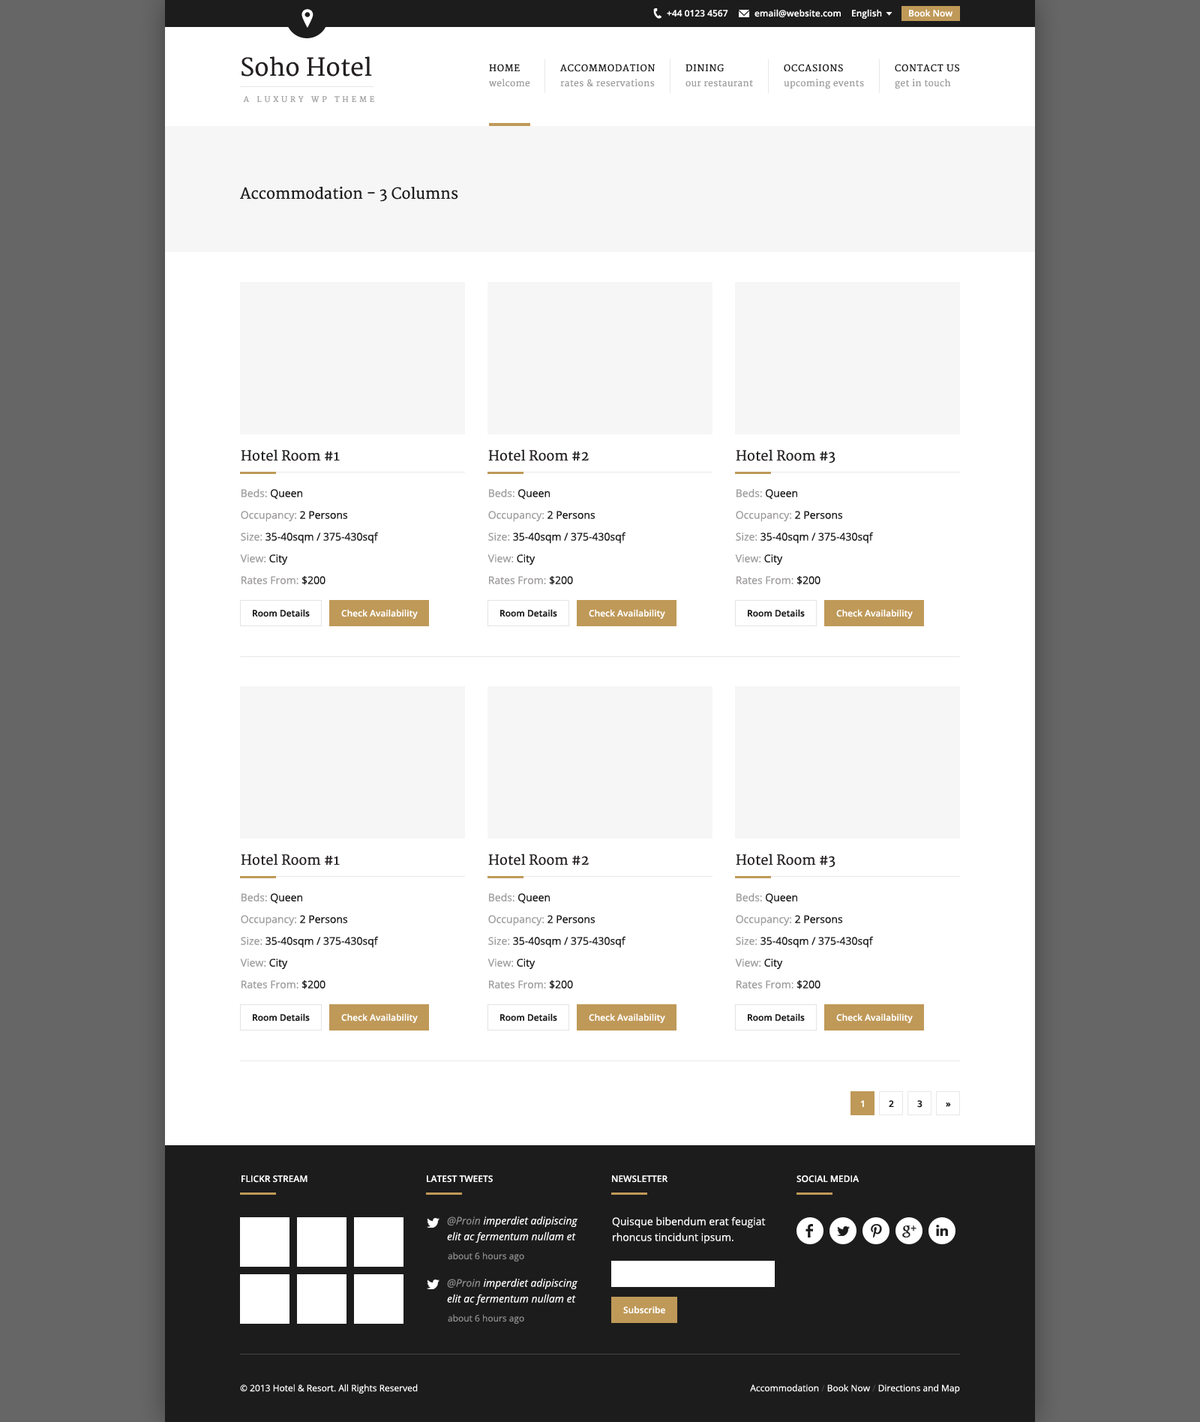
<style>
.page{position:relative;width:1200px;height:1422px;background:#ffffff}
.page>*{position:absolute;margin:0}
.t1{font:9px "OpenSans-Semibold";color:#ffffff}
.t2{font:24px "Merriweather";color:#231f20}
.t3{font:9px "Merriweather";letter-spacing:0.075em;color:#1c1c1c;text-transform:uppercase}
.t4{font:9px "Merriweather";letter-spacing:0.025em;color:#a09d9d}
.t5{font:7.5px "Merriweather";letter-spacing:0.4em;color:#a09d9d;text-transform:uppercase}
.t6{font:15px "Merriweather";color:#1c1c1c}
.t7{font:13.5px "Merriweather";color:#231f20}
.t8{font:10.5px/21.7px "OpenSans";color:#1c1c1c}
.t9{font:10.5px/21.7px "OpenSans";color:#a09d9d}
.t10{font:9px "OpenSans-Semibold";color:#1c1c1c}
.t11{font:9px "OpenSans-Semibold";color:#ffffff;text-transform:uppercase}
.t12{font:10.5px/15.7px "OpenSans-Italic";color:#ffffff}
.t13{font:10.5px/15.7px "OpenSans-Italic";color:#8b8b8b}
.t14{font:10.5px/15.7px "OpenSans";color:#ffffff}
.t15{font:9px "OpenSans";color:#8b8b8b}
.t16{font:9px "OpenSans";color:#ffffff}
.t17{font:9px "OpenSans";color:#424242}
</style>
<div class="page">
<p class="t1" style="left:667px;top:10px;width:61px;height:7px">+44 0123 4567</p>
<p class="t1" style="left:754px;top:9px;width:87px;height:8px">email@website.com</p>
<p class="t1" style="left:852px;top:9px;width:30px;height:10px">English</p>
<p class="t1" style="left:909px;top:9px;width:43px;height:8px">Book Now</p>
<p class="t2" style="left:242px;top:56px;width:130px;height:20px">Soho Hotel</p>
<p class="t3" style="left:489px;top:64px;width:31px;height:8px">Home</p>
<p class="t3" style="left:560px;top:64px;width:95px;height:8px">Accommodation</p>
<p class="t3" style="left:686px;top:64px;width:38px;height:8px">Dining</p>
<p class="t3" style="left:784px;top:64px;width:59px;height:8px">Occasions</p>
<p class="t3" style="left:895px;top:64px;width:64px;height:8px">Contact Us</p>
<p class="t4" style="left:489px;top:79px;width:41px;height:8px">welcome</p>
<p class="t4" style="left:560px;top:79px;width:95px;height:8px">rates &amp; reservations</p>
<p class="t4" style="left:686px;top:80px;width:67px;height:7px">our restaurant</p>
<p class="t4" style="left:784px;top:79px;width:80px;height:10px">upcoming events</p>
<p class="t4" style="left:895px;top:79px;width:56px;height:10px">get in touch</p>
<p class="t5" style="left:243px;top:96px;width:131px;height:7px">A Luxury WP Theme</p>
<p class="t6" style="left:240px;top:186px;width:218px;height:16px">Accommodation - 3 Columns</p>
<p class="t7" style="left:241px;top:449px;width:99px;height:12px">Hotel Room #1</p>
<p class="t7" style="left:488px;top:449px;width:101px;height:12px">Hotel Room #2</p>
<p class="t7" style="left:736px;top:449px;width:100px;height:14px">Hotel Room #3</p>
<p class="t8" style="left:240px;top:489px;width:139px;height:96px"><span class="t9">Beds: </span>Queen<br><span class="t9">Occupancy:</span> 2 Persons<br><span class="t9">Size:</span> 35-40sqm / 375-430sqf<br><span class="t9">View: </span>City<br><span class="t9">Rates From:</span> $200</p>
<p class="t8" style="left:488px;top:489px;width:138px;height:96px"><span class="t9">Beds: </span>Queen<br><span class="t9">Occupancy:</span> 2 Persons<br><span class="t9">Size:</span> 35-40sqm / 375-430sqf<br><span class="t9">View: </span>City<br><span class="t9">Rates From:</span> $200</p>
<p class="t8" style="left:735px;top:489px;width:139px;height:96px"><span class="t9">Beds: </span>Queen<br><span class="t9">Occupancy:</span> 2 Persons<br><span class="t9">Size:</span> 35-40sqm / 375-430sqf<br><span class="t9">View: </span>City<br><span class="t9">Rates From:</span> $200</p>
<p class="t10" style="left:253px;top:609px;width:57px;height:8px">Room Details</p>
<p class="t1" style="left:341px;top:609px;width:77px;height:10px">Check Availability</p>
<p class="t10" style="left:500px;top:609px;width:57px;height:8px">Room Details</p>
<p class="t1" style="left:589px;top:609px;width:76px;height:10px">Check Availability</p>
<p class="t10" style="left:748px;top:609px;width:57px;height:8px">Room Details</p>
<p class="t1" style="left:836px;top:609px;width:77px;height:10px">Check Availability</p>
<p class="t7" style="left:241px;top:854px;width:99px;height:12px">Hotel Room #1</p>
<p class="t7" style="left:488px;top:854px;width:101px;height:12px">Hotel Room #2</p>
<p class="t7" style="left:736px;top:854px;width:100px;height:13px">Hotel Room #3</p>
<p class="t8" style="left:240px;top:893px;width:139px;height:96px"><span class="t9">Beds: </span>Queen<br><span class="t9">Occupancy:</span> 2 Persons<br><span class="t9">Size:</span> 35-40sqm / 375-430sqf<br><span class="t9">View: </span>City<br><span class="t9">Rates From:</span> $200</p>
<p class="t8" style="left:488px;top:893px;width:138px;height:96px"><span class="t9">Beds: </span>Queen<br><span class="t9">Occupancy:</span> 2 Persons<br><span class="t9">Size:</span> 35-40sqm / 375-430sqf<br><span class="t9">View: </span>City<br><span class="t9">Rates From:</span> $200</p>
<p class="t8" style="left:735px;top:893px;width:139px;height:96px"><span class="t9">Beds: </span>Queen<br><span class="t9">Occupancy:</span> 2 Persons<br><span class="t9">Size:</span> 35-40sqm / 375-430sqf<br><span class="t9">View: </span>City<br><span class="t9">Rates From:</span> $200</p>
<p class="t10" style="left:253px;top:1013px;width:57px;height:9px">Room Details</p>
<p class="t1" style="left:341px;top:1013px;width:77px;height:10px">Check Availability</p>
<p class="t10" style="left:500px;top:1013px;width:57px;height:9px">Room Details</p>
<p class="t1" style="left:589px;top:1013px;width:76px;height:10px">Check Availability</p>
<p class="t10" style="left:748px;top:1013px;width:57px;height:9px">Room Details</p>
<p class="t1" style="left:836px;top:1013px;width:77px;height:10px">Check Availability</p>
<p class="t1" style="left:860px;top:1100px;width:4px;height:7px">1</p>
<p class="t10" style="left:889px;top:1100px;width:5px;height:7px">2</p>
<p class="t10" style="left:917px;top:1100px;width:5px;height:8px">3</p>
<p class="t10" style="left:946px;top:1102px;width:5px;height:5px">»</p>
<p class="t11" style="left:242px;top:1175px;width:66px;height:8px">Flickr Stream</p>
<p class="t11" style="left:427px;top:1175px;width:66px;height:8px">Latest Tweets</p>
<p class="t11" style="left:612px;top:1175px;width:56px;height:8px">Newsletter</p>
<p class="t11" style="left:796px;top:1175px;width:64px;height:8px">Social Media</p>
<p class="t12" style="left:447px;top:1216px;width:131px;height:27px"><span class="t13">@Proin </span>imperdiet adipiscing elit ac fermentum nullam et</p>
<p class="t14" style="left:612px;top:1216px;width:154px;height:28px">Quisque bibendum erat feugiat rhoncus tincidunt ipsum.</p>
<p class="t15" style="left:448px;top:1252px;width:76px;height:10px">about 6 hours ago</p>
<p class="t12" style="left:447px;top:1278px;width:131px;height:27px"><span class="t13">@Proin</span> imperdiet adipiscing elit ac fermentum nullam et</p>
<p class="t1" style="left:623px;top:1306px;width:42px;height:8px">Subscribe</p>
<p class="t15" style="left:448px;top:1314px;width:76px;height:10px">about 6 hours ago</p>
<p class="t16" style="left:240px;top:1384px;width:178px;height:10px">© 2013 Hotel &amp; Resort. All Rights Reserved</p>
<p class="t16" style="left:750px;top:1384px;width:210px;height:10px">Accommodation <span class="t17">/</span> Book Now <span class="t17">/</span> Directions and Map</p>
</div>
